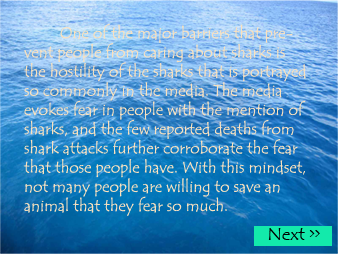
<style>
.page{position:relative;width:338px;height:254px}
.page>*{position:absolute;margin:0}
.t1{font:16px "TempusSansITC";color:#f9e1bf}
</style>
<div class="page">
<p class="t1" style="left:23px;top:23px;width:283px;height:193px">One of the major barriers that prevent people from caring about sharks is the hostility of the sharks that is portrayed so commonly in the media. The media evokes fear in people with the mention of sharks, and the few reported deaths from shark attacks further corroborate the fear that those people have. With this mindset, not many people are willing to save an animal that they fear so much.</p>
</div>
